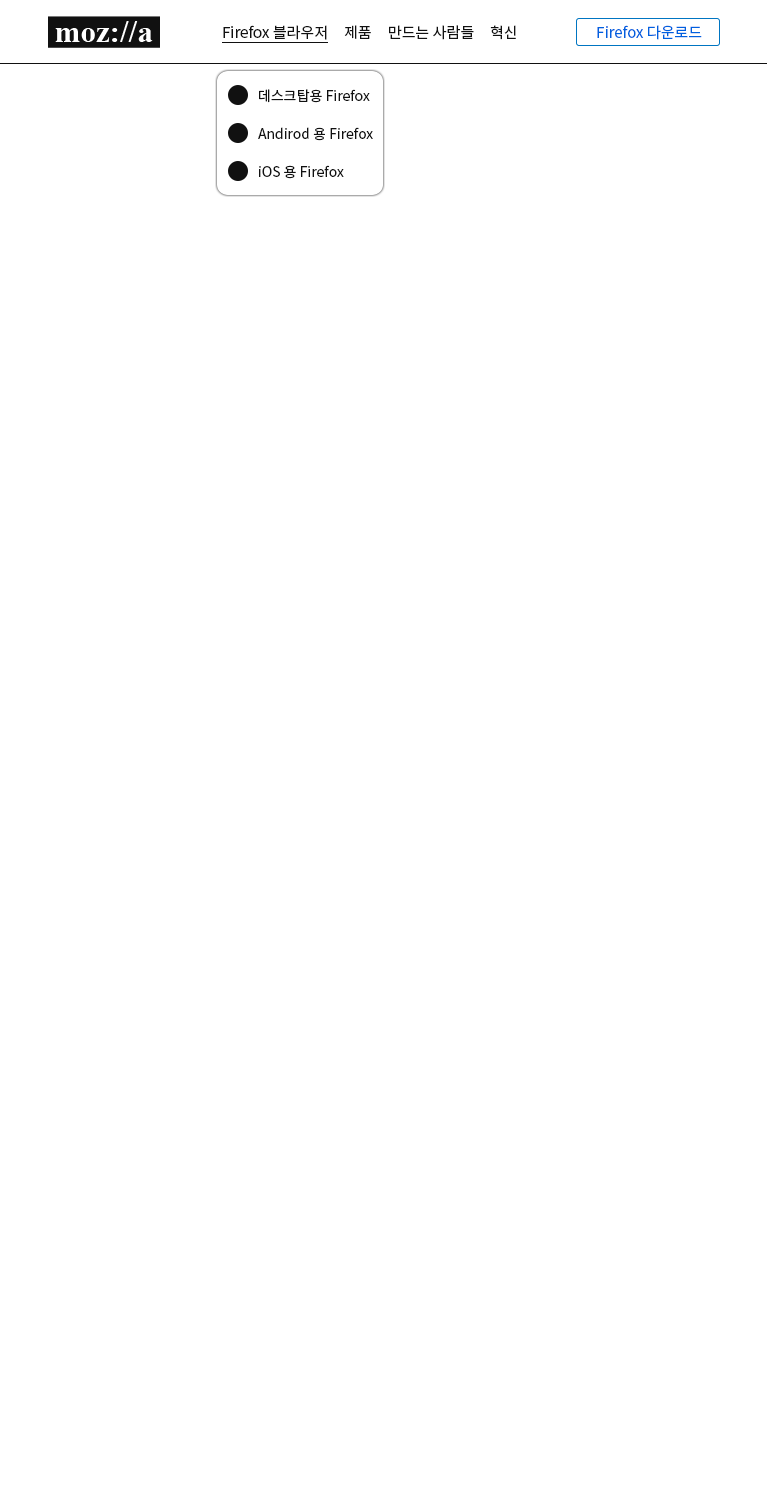
<style>
.page{position:relative;width:768px;height:1500px;background:#ffffff}
.page>*{position:absolute;margin:0}
.t1{font:15px "NotoSansKR-Regular";color:#111111}
.t2{font:15px "NotoSansKR-Regular";color:#0060df}
.t3{font:14px "NotoSansKR-Regular";color:#111111}
</style>
<div class="page">
<p class="t1" style="left:223px;top:25px;width:104px;height:15px">Firefox 블라우저</p>
<p class="t1" style="left:344px;top:25px;width:27px;height:14px">제품</p>
<p class="t1" style="left:389px;top:25px;width:85px;height:15px">만드는 사람들</p>
<p class="t1" style="left:490px;top:25px;width:26px;height:15px">혁신</p>
<p class="t2" style="left:597px;top:25px;width:105px;height:15px">Firefox 다운로드</p>
<p class="t3" style="left:259px;top:89px;width:111px;height:14px">데스크탑용 Firefox</p>
<p class="t3" style="left:258px;top:127px;width:115px;height:14px">Andirod 용 Firefox</p>
<p class="t3" style="left:259px;top:165px;width:85px;height:14px">iOS 용 Firefox</p>
</div>
